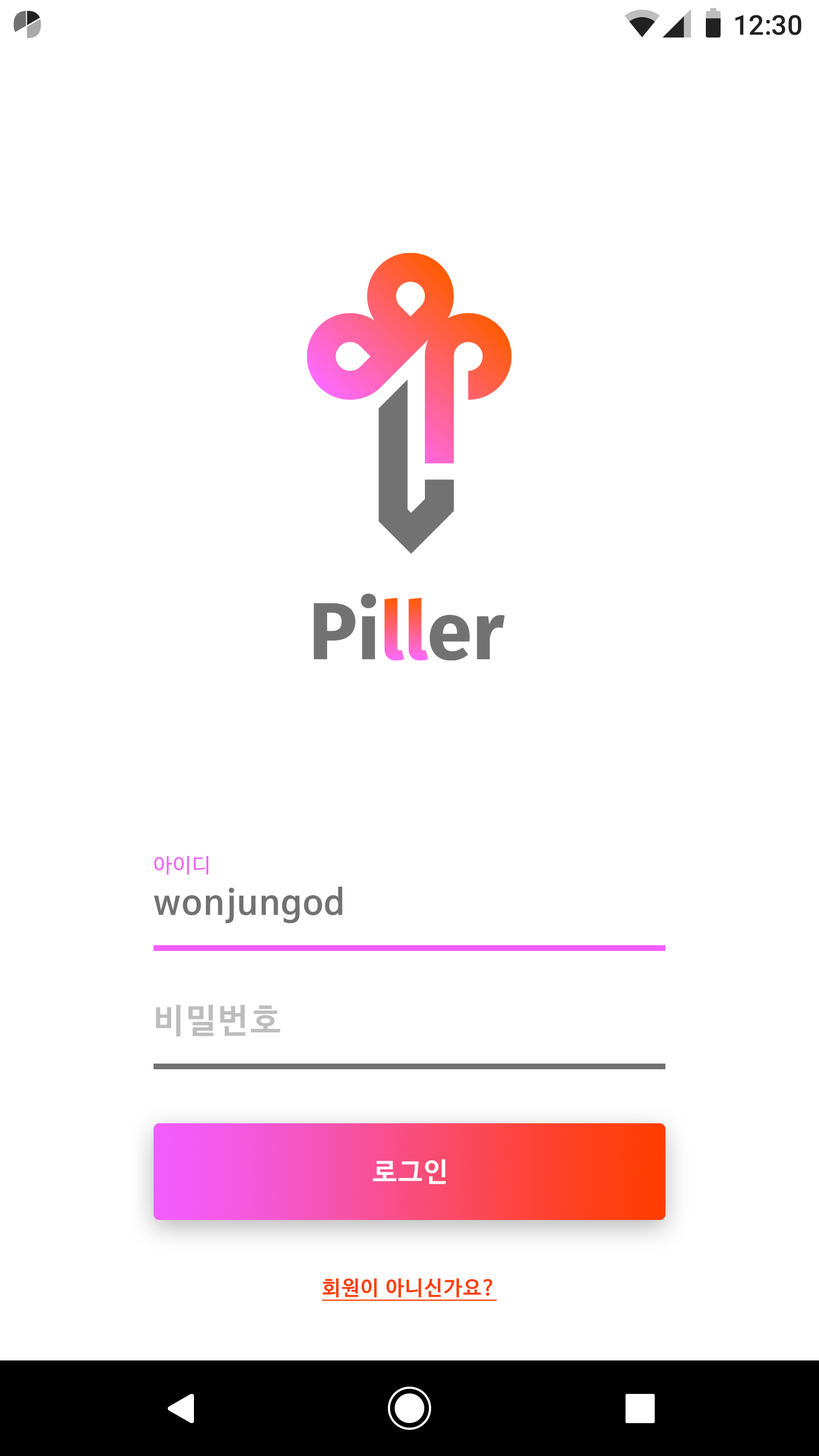
<style>
.page{position:relative;width:819px;height:1456px;background:#ffffff}
.page>*{position:absolute;margin:0}
.t1{font:27.3px "Roboto-Medium";color:#212121}
.t2{font:20.5px "NanumBarunGothic";letter-spacing:0.05em;color:#f25dff}
.t3{font:34.1px "NanumBarunGothicBold";letter-spacing:0.05em;color:#727272}
.t4{font:34.1px "NanumBarunGothicBold";letter-spacing:0.05em;color:#bdbdbd}
.t5{font:27.3px "NanumBarunGothicBold";letter-spacing:0.05em;color:#ffffff}
.t6{font:20.5px "NanumBarunGothicBold";letter-spacing:0.05em;color:#ff3d00;text-decoration:underline}
</style>
<div class="page">
<p class="t1" style="left:735px;top:15px;width:66px;height:20px">12:30</p>
<p class="t2" style="left:154px;top:856px;width:55px;height:19px">아이디</p>
<p class="t3" style="left:154px;top:887px;width:188px;height:37px">wonjungod</p>
<p class="t4" style="left:156px;top:1004px;width:124px;height:33px">비밀번호</p>
<p class="t5" style="left:373px;top:1159px;width:73px;height:25px">로그인</p>
<p class="t6" style="left:322px;top:1278px;width:175px;height:23px">회원이 아니신가요?</p>
</div>
